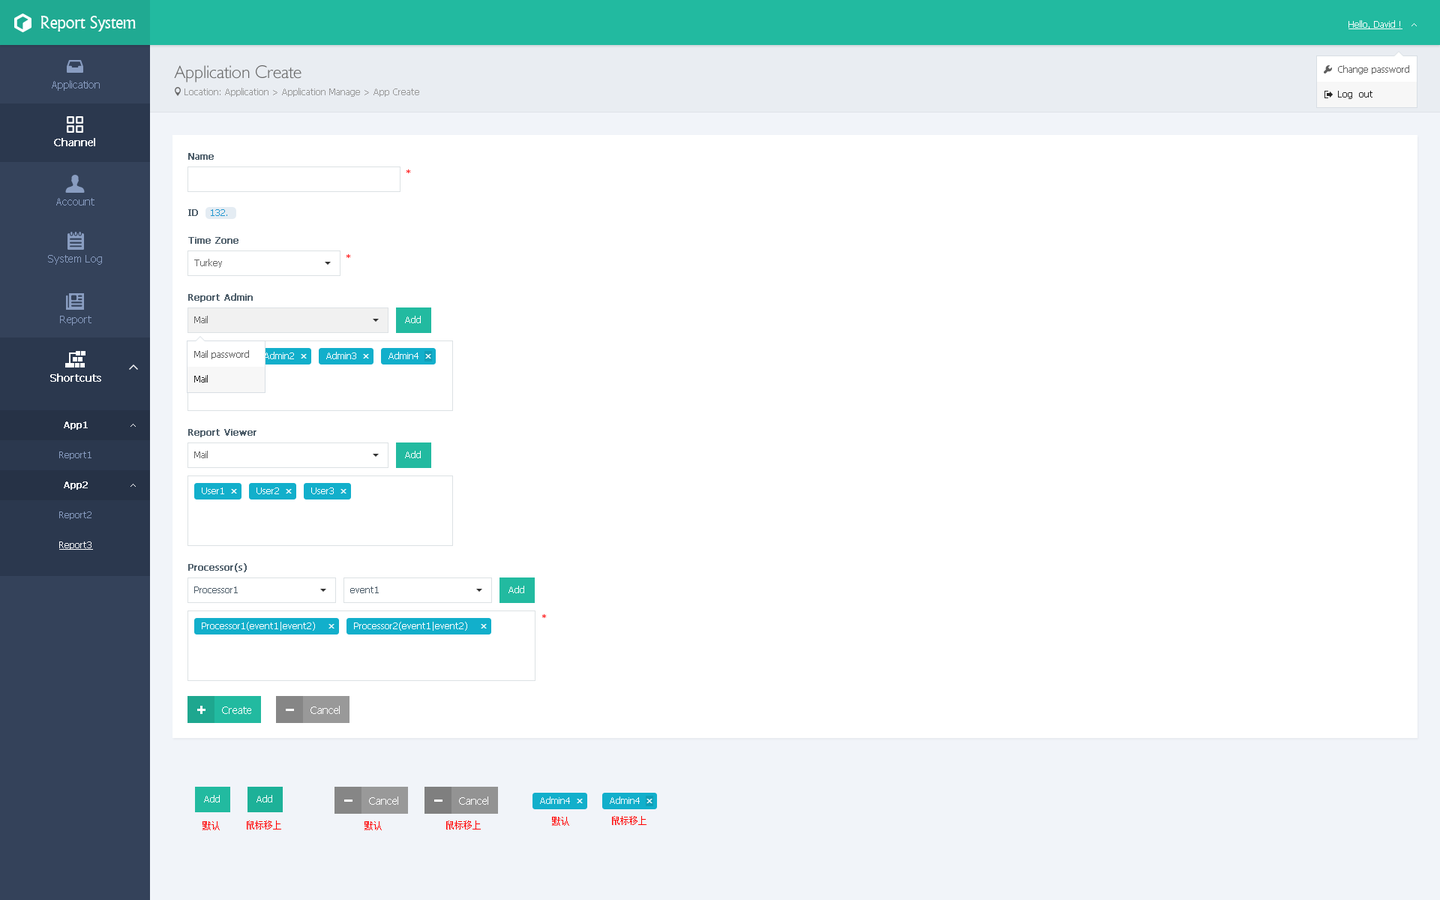
<style>
.page{position:relative;width:1440px;height:900px;background:#ffffff}
.page>*{position:absolute;margin:0}
.t1{font:18px "Narkisim";letter-spacing:-0.022em;color:#ffffff}
.t2{font:9px "Tahoma";color:#ffffff;text-decoration:underline}
.t3{font:18px "084-CAI978";color:#666666}
.t4{font:9px "Tahoma";color:#5f5f5f}
.t5{font:10.5px "Tahoma";color:#899dc1}
.t6{font:9px "Tahoma";color:#999999}
.t7{font:9px "Tahoma";color:#262626}
.t8{font:10.5px "Tahoma";color:#ffffff;font-weight:bold}
.t9{font:9px "Tahoma";color:#4e5e6a;font-weight:bold}
.t10{font:9px "Tahoma";color:#ff0000}
.t11{font:9px "Tahoma";color:#2498d0}
.t12{font:9px "Tahoma";color:#666666}
.t13{font:9px "Tahoma";color:#ffffff}
.t14{font:9px "Tahoma";color:#ffffff;font-weight:bold}
.t15{font:9px "Tahoma";color:#899dc1}
.t16{font:9px "Tahoma";color:#4e5e6a}
.t17{font:10.5px "Tahoma";color:#ffffff}
.t18{font:9px "SimSun";color:#ff0000}
</style>
<div class="page">
<p class="t1" style="left:40px;top:16px;width:96px;height:16px">Report System</p>
<p class="t2" style="left:1348px;top:20px;width:54px;height:9px">Hello, David !</p>
<p class="t3" style="left:174px;top:65px;width:128px;height:17px">Application Create</p>
<p class="t4" style="left:1338px;top:65px;width:71px;height:9px">Change password</p>
<p class="t5" style="left:52px;top:80px;width:48px;height:11px">Application</p>
<p class="t6" style="left:184px;top:88px;width:235px;height:9px">Location: Application &gt; Application Manage &gt; App Create</p>
<p class="t7" style="left:1338px;top:91px;width:34px;height:8px">Log  out</p>
<p class="t8" style="left:54px;top:138px;width:41px;height:8px">Channel</p>
<p class="t9" style="left:188px;top:153px;width:26px;height:7px">Name</p>
<p class="t10" style="left:406px;top:170px;width:4px;height:3px">*</p>
<p class="t5" style="left:56px;top:198px;width:38px;height:8px">Account</p>
<p class="t9" style="left:188px;top:209px;width:10px;height:7px">ID</p>
<p class="t11" style="left:211px;top:209px;width:16px;height:7px">132.</p>
<p class="t9" style="left:188px;top:237px;width:50px;height:7px">Time Zone</p>
<p class="t5" style="left:48px;top:255px;width:54px;height:10px">System Log</p>
<p class="t10" style="left:346px;top:254px;width:4px;height:4px">*</p>
<p class="t12" style="left:194px;top:259px;width:28px;height:9px">Turkey</p>
<p class="t9" style="left:188px;top:293px;width:65px;height:9px">Report Admin</p>
<p class="t5" style="left:60px;top:316px;width:32px;height:10px">Report</p>
<p class="t12" style="left:194px;top:316px;width:14px;height:7px">Mail</p>
<p class="t13" style="left:405px;top:316px;width:16px;height:7px">Add</p>
<p class="t4" style="left:194px;top:350px;width:55px;height:9px">Mail password</p>
<p class="t13" style="left:264px;top:352px;width:30px;height:7px">Admin2</p>
<p class="t13" style="left:326px;top:352px;width:30px;height:7px">Admin3</p>
<p class="t13" style="left:388px;top:352px;width:30px;height:7px">Admin4</p>
<p class="t8" style="left:50px;top:374px;width:51px;height:8px">Shortcuts</p>
<p class="t7" style="left:194px;top:375px;width:14px;height:7px">Mail</p>
<p class="t14" style="left:64px;top:422px;width:24px;height:8px">App1</p>
<p class="t9" style="left:188px;top:429px;width:68px;height:8px">Report Viewer</p>
<p class="t15" style="left:59px;top:452px;width:33px;height:8px">Report1</p>
<p class="t12" style="left:194px;top:451px;width:14px;height:7px">Mail</p>
<p class="t13" style="left:405px;top:451px;width:16px;height:7px">Add</p>
<p class="t14" style="left:64px;top:482px;width:24px;height:8px">App2</p>
<p class="t13" style="left:202px;top:488px;width:22px;height:6px">User1</p>
<p class="t13" style="left:256px;top:488px;width:23px;height:6px">User2</p>
<p class="t13" style="left:311px;top:488px;width:23px;height:6px">User3</p>
<p class="t15" style="left:59px;top:512px;width:33px;height:8px">Report2</p>
<p class="t2" style="left:59px;top:542px;width:34px;height:8px">Report3</p>
<p class="t9" style="left:188px;top:563px;width:59px;height:9px">Processor(s)</p>
<p class="t16" style="left:194px;top:586px;width:44px;height:7px">Processor1</p>
<p class="t16" style="left:350px;top:586px;width:29px;height:7px">event1</p>
<p class="t13" style="left:508px;top:586px;width:16px;height:7px">Add</p>
<p class="t10" style="left:542px;top:614px;width:4px;height:4px">*</p>
<p class="t13" style="left:202px;top:622px;width:113px;height:9px">Processor1(event1|event2)</p>
<p class="t13" style="left:354px;top:622px;width:113px;height:9px">Processor2(event1|event2)</p>
<p class="t17" style="left:222px;top:706px;width:29px;height:8px">Create</p>
<p class="t17" style="left:310px;top:706px;width:30px;height:8px">Cancel</p>
<p class="t13" style="left:204px;top:795px;width:16px;height:7px">Add</p>
<p class="t13" style="left:256px;top:795px;width:16px;height:7px">Add</p>
<p class="t17" style="left:369px;top:796px;width:29px;height:9px">Cancel</p>
<p class="t17" style="left:459px;top:796px;width:29px;height:9px">Cancel</p>
<p class="t13" style="left:540px;top:796px;width:30px;height:8px">Admin4</p>
<p class="t13" style="left:610px;top:796px;width:30px;height:8px">Admin4</p>
<p class="t18" style="left:202px;top:821px;width:18px;height:9px">默认</p>
<p class="t18" style="left:247px;top:820px;width:34px;height:10px">鼠标移上</p>
<p class="t18" style="left:364px;top:821px;width:18px;height:9px">默认</p>
<p class="t18" style="left:446px;top:820px;width:35px;height:10px">鼠标移上</p>
<p class="t18" style="left:552px;top:817px;width:17px;height:9px">默认</p>
<p class="t18" style="left:612px;top:816px;width:34px;height:9px">鼠标移上</p>
</div>
